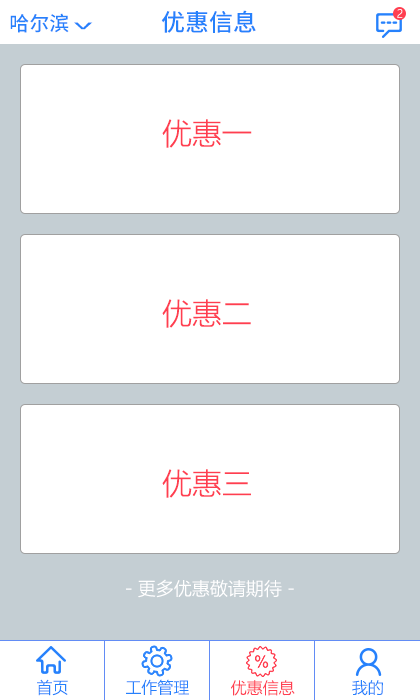
<style>
.page{position:relative;width:420px;height:700px;background:#ffffff}
.page>*{position:absolute;margin:0}
.t1{font:20px "NotoSansHans-Medium";color:#2681fc}
.t2{font:24px "NotoSansHans-Medium";color:#2681fc}
.t3{font:11px "MicrosoftYaHeiLight";color:#fcf9fa}
.t4{font:38.7px "NotoSansHans-Medium";color:#2681fc;scale:0.36 1}
.t5{font:30px "MicrosoftYaHeiLight";color:#ff3e50}
.t6{font:18px "MicrosoftYaHeiLight";color:#ffffff}
.t7{font:16px "MicrosoftYaHeiLight";color:#2681fc}
.t8{font:16px "MicrosoftYaHeiLight";color:#ff3e50}
</style>
<div class="page">
<p class="t1" style="left:10px;top:13px;width:59px;height:20px">哈尔滨</p>
<p class="t2" style="left:161px;top:10px;width:95px;height:23px">优惠信息</p>
<p class="t3" style="left:397px;top:9px;width:6px;height:9px">2</p>
<p class="t4" style="left:74px;top:22px;width:19px;height:8px;rotate:90deg">&gt;</p>
<p class="t5" style="left:162px;top:119px;width:90px;height:29px">优惠一</p>
<p class="t5" style="left:162px;top:299px;width:89px;height:29px">优惠二</p>
<p class="t5" style="left:162px;top:469px;width:89px;height:29px">优惠三</p>
<p class="t6" style="left:126px;top:579px;width:168px;height:19px">- 更多优惠敬请期待 -</p>
<p class="t7" style="left:37px;top:679px;width:31px;height:17px">首页</p>
<p class="t7" style="left:126px;top:679px;width:63px;height:16px">工作管理</p>
<p class="t8" style="left:231px;top:680px;width:64px;height:16px">优惠信息</p>
<p class="t7" style="left:352px;top:680px;width:31px;height:16px">我的</p>
</div>
